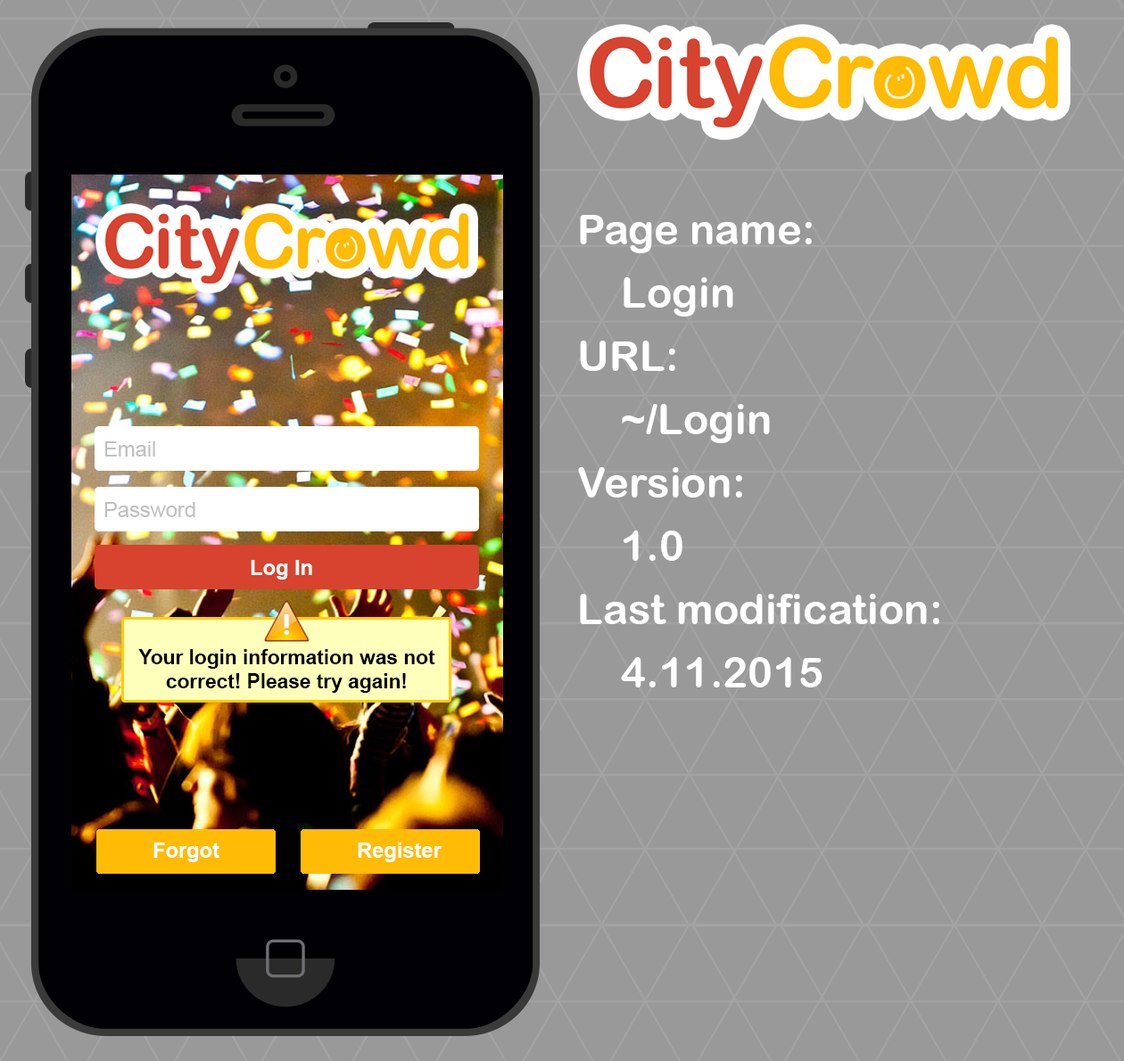
<style>
.page{position:relative;width:1124px;height:1061px;background:#999999}
.page>*{position:absolute;margin:0}
.t1{font:42.2px/63.3px "ArialRoundedMTBold";color:#ffffff}
.t2{font:21.1px "ArialMT";color:#c0c0c0}
.t3{font:21.1px "Arial-BoldMT";color:#ffffff}
.t4{font:20.2px "Arial-BoldMT";color:#000000}
</style>
<div class="page">
<p class="t1" style="left:578px;top:215px;width:361px;height:473px">Page name:<br>Login<br>URL:<br>~/Login<br>Version:<br>1.0<br>Last modification:<br>4.11.2015</p>
<p class="t2" style="left:104px;top:441px;width:51px;height:16px">Email</p>
<p class="t2" style="left:104px;top:502px;width:91px;height:15px">Password</p>
<p class="t3" style="left:251px;top:560px;width:61px;height:20px">Log In</p>
<p class="t4" style="left:138px;top:649px;width:297px;height:44px;text-align:center">Your login information was not correct! Please try again!</p>
<p class="t3" style="left:153px;top:843px;width:66px;height:19px">Forgot</p>
<p class="t3" style="left:358px;top:843px;width:83px;height:19px">Register</p>
</div>
